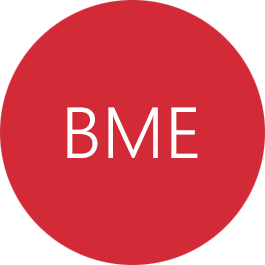
<style>
.page{position:relative;width:265px;height:265px;background:#d22b37}
.page>*{position:absolute;margin:0}
.t1{font:72px "SegoeWP-SemiLight";letter-spacing:0.01em;color:#ffffff}
</style>
<div class="page">
<p class="t1" style="left:67px;top:107px;width:131px;height:51px">BME</p>
</div>
